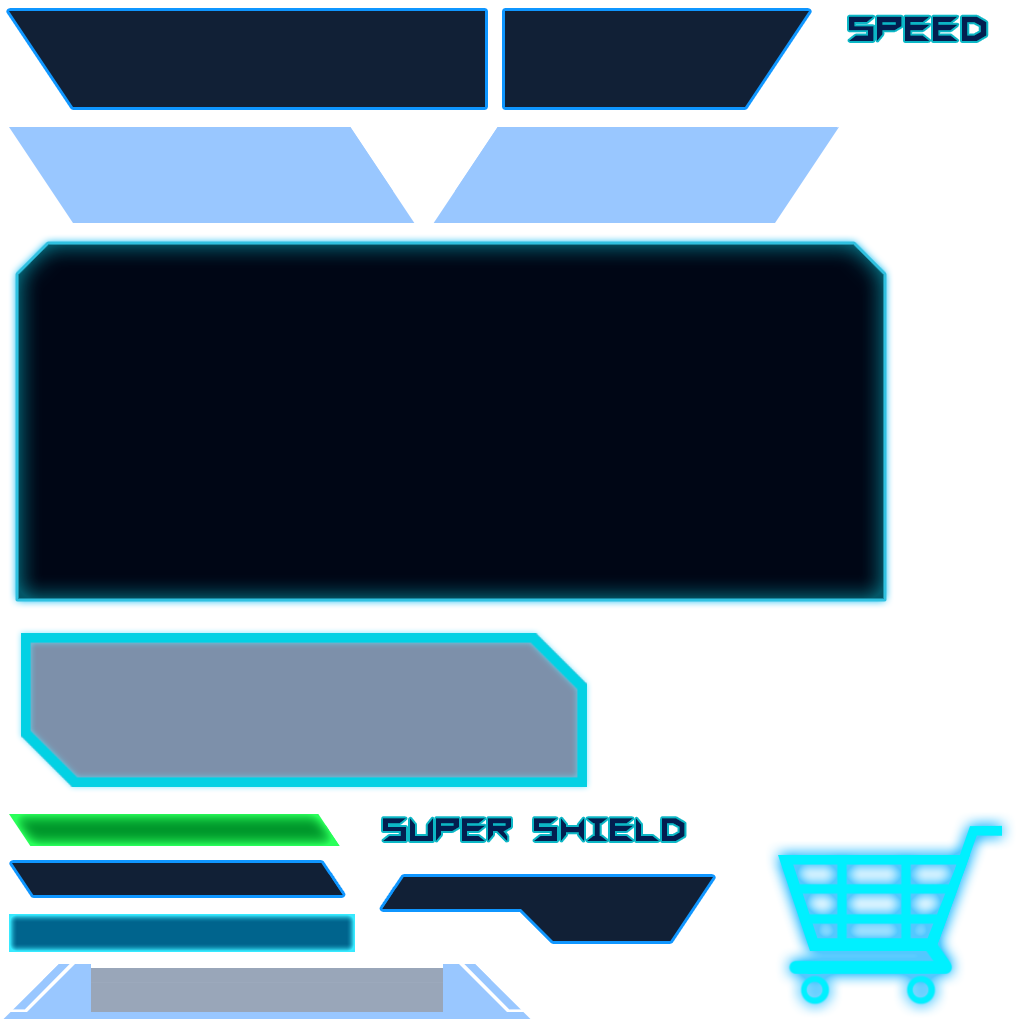
<style>
.page{position:relative;width:1024px;height:1024px;background:#ffffff}
.page>*{position:absolute;margin:0}
.t1{font:35.1px "SharpsGF";color:#031e50}
.t2{font:32.8px "SharpsGF";color:#031e50}
</style>
<div class="page">
<p class="t1" style="left:849px;top:16px;width:138px;height:25px">SPEED</p>
<p class="t2" style="left:383px;top:818px;width:302px;height:23px">super shield</p>
</div>
